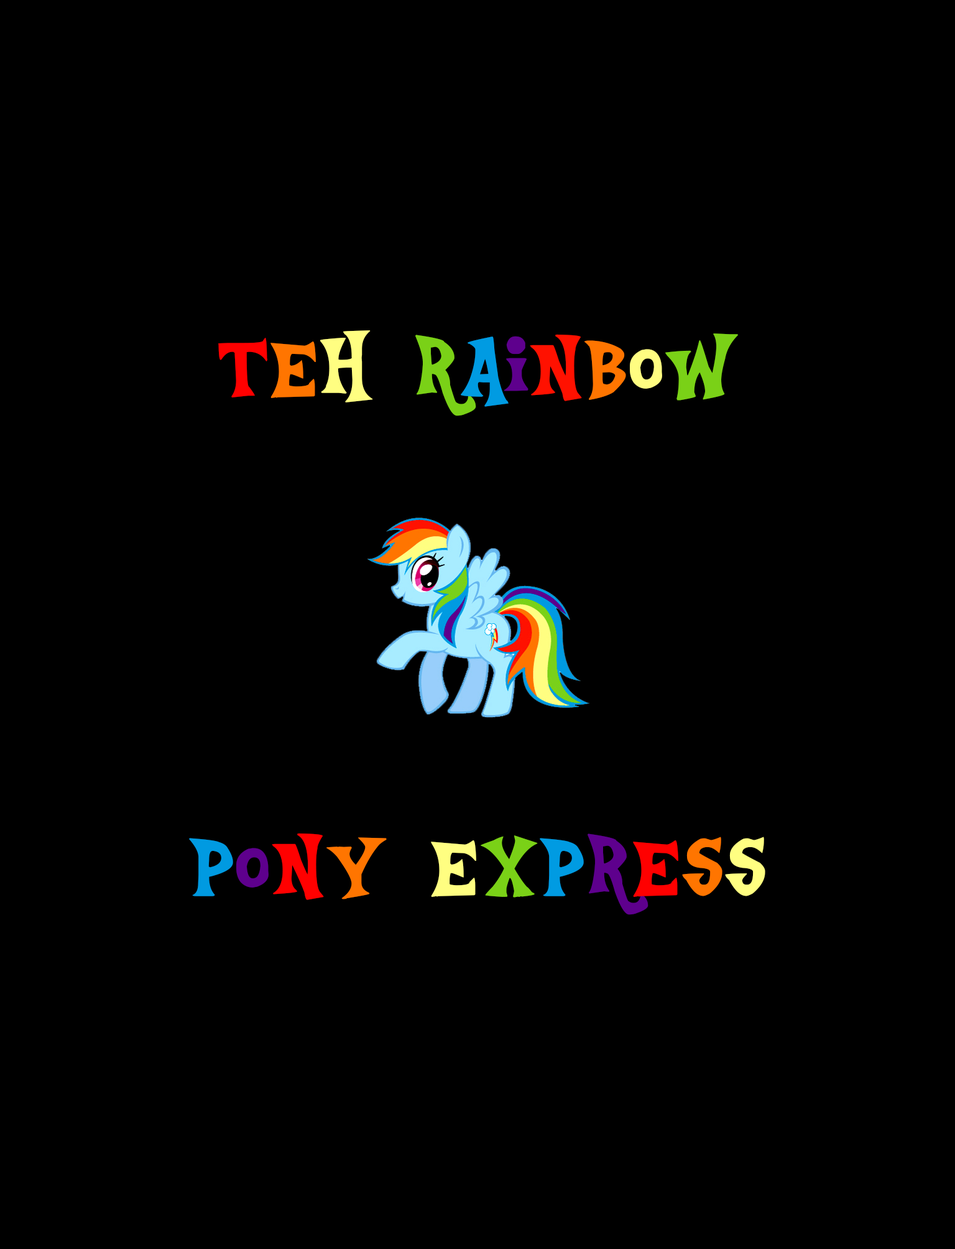
<style>
.page{position:relative;width:955px;height:1249px;background:#000000}
.page>*{position:absolute;margin:0}
.t1{font:94.5px "Equestria";letter-spacing:-0.01em;color:#ff0000}
.t2{font:94.5px "Equestria";letter-spacing:-0.01em;color:#ff7500}
.t3{font:94.5px "Equestria";letter-spacing:-0.01em;color:#fffe81}
.t4{font:94.5px "Equestria";letter-spacing:-0.01em;color:#7ad117}
.t5{font:94.5px "Equestria";letter-spacing:-0.01em;color:#009be2}
.t6{font:94.5px "Equestria";letter-spacing:-0.01em;color:#5e008d}
.t7{font:94.5px "Equestria";letter-spacing:-0.01em;color:#ff1100}
.t8{font:94.5px "Equestria";letter-spacing:-0.01em;color:#fffd81}
.t9{font:94.5px "Equestria";letter-spacing:-0.01em;color:#009ae1}
</style>
<div class="page">
<p class="t1" style="left:218px;top:330px;width:521px;height:86px">T<span class="t2">E</span><span class="t3">H </span><span class="t4">R</span><span class="t5">A</span><span class="t6">I</span><span class="t7">N</span><span class="t2">B</span><span class="t8">O</span><span class="t4">W</span></p>
<p class="t9" style="left:189px;top:833px;width:576px;height:82px">P<span class="t6">O</span><span class="t1">N</span><span class="t2">Y </span><span class="t3">E</span><span class="t4">X</span><span class="t5">P</span><span class="t6">R</span><span class="t1">E</span><span class="t2">S</span><span class="t3">S</span></p>
</div>
